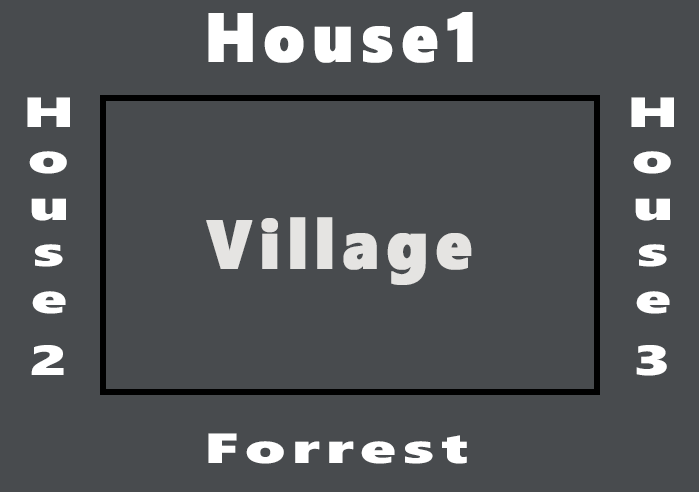
<style>
.page{position:relative;width:699px;height:492px;background:#484b4e}
.page>*{position:absolute;margin:0}
.t1{font:68.5px "SegoeWP-Black";letter-spacing:0.1em;color:#ffffff;font-weight:bold;scale:0.93 1}
.t2{font:64px "SegoeWP-Black";letter-spacing:0.1em;color:#ffffff;scale:0.66 1}
.t3{font:68.5px "SegoeWP-Black";letter-spacing:0.1em;color:#e5e4e2;font-weight:bold;scale:0.93 1}
.t4{font:42.2px "SegoeWP-Black";letter-spacing:0.1em;color:#ffffff;scale:1.52 1}
</style>
<div class="page">
<p class="t1" style="left:208px;top:12px;width:265px;height:51px">House1</p>
<p class="t2" style="left:27px;top:97px;width:43px;height:278px;text-align:center">House 2</p>
<p class="t2" style="left:631px;top:97px;width:43px;height:279px;text-align:center">House 3</p>
<p class="t3" style="left:206px;top:217px;width:266px;height:68px">Village</p>
<p class="t4" style="left:208px;top:433px;width:259px;height:31px">Forrest</p>
</div>
